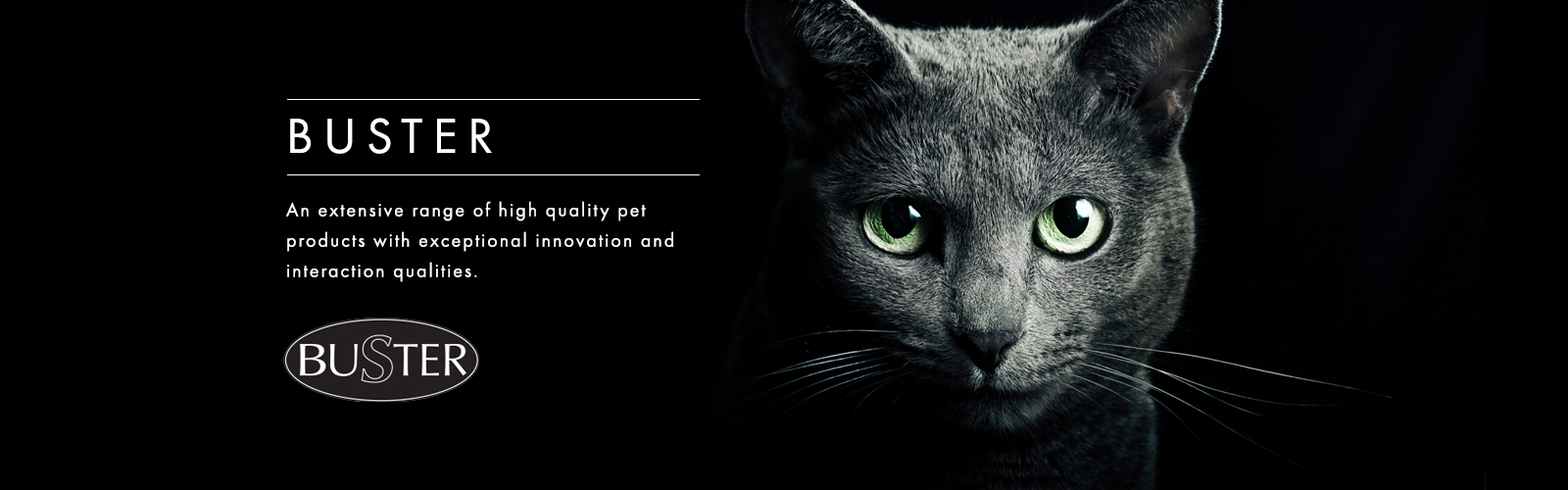
<style>
.page{position:relative;width:1568px;height:490px;background:#000000}
.page>*{position:absolute;margin:0}
.t1{font:51px "FuturaPT-Book";letter-spacing:0.2em;color:#ffffff}
.t2{font:19.6px/30.4px "FuturaPT-Book";letter-spacing:0.1em;color:#ffffff}
</style>
<div class="page">
<p class="t1" style="left:290px;top:118px;width:202px;height:36px">BUSTER</p>
<p class="t2" style="left:286px;top:201px;width:387px;height:81px">An extensive range of high quality pet products with exceptional innovation and interaction qualities.</p>
</div>
